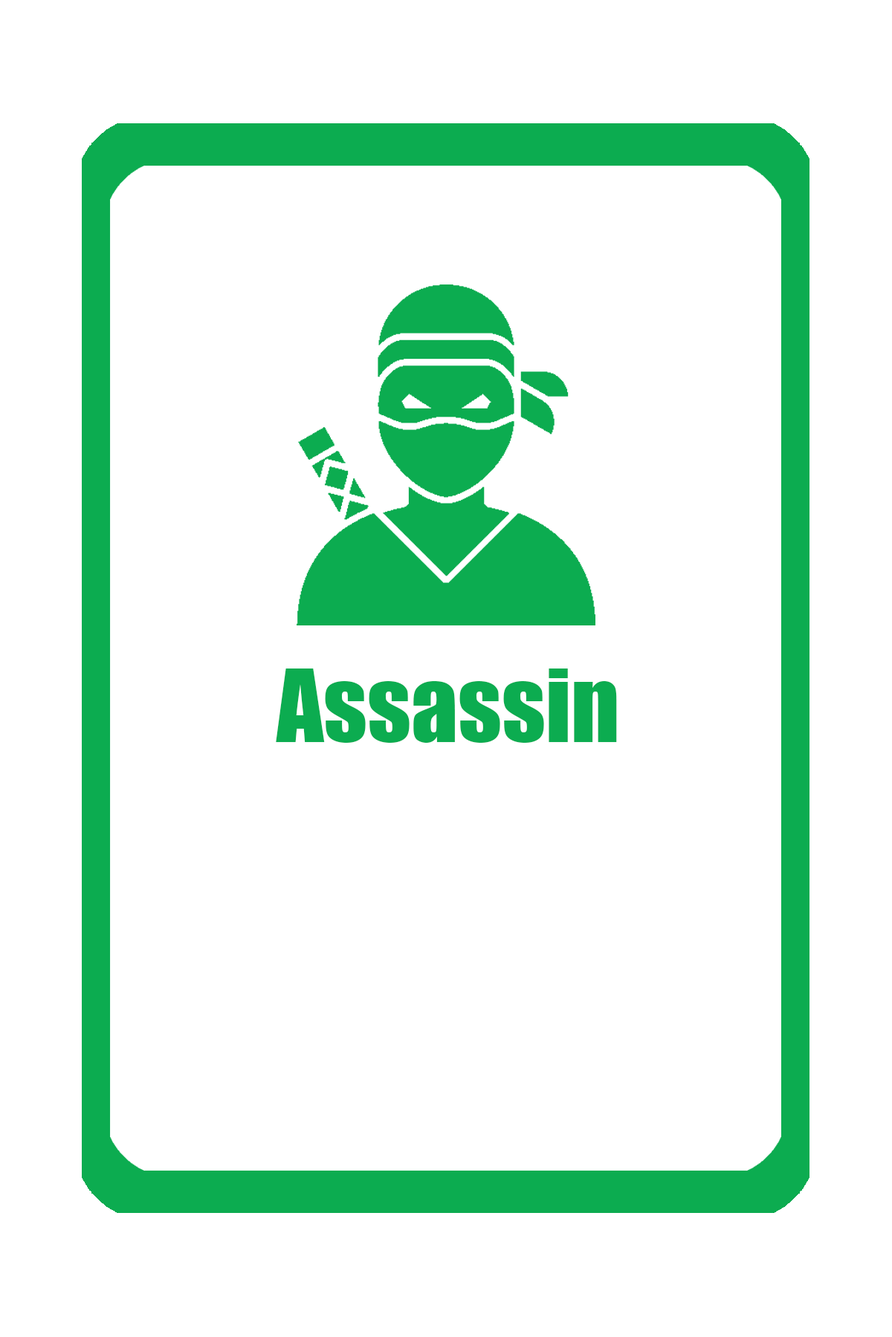
<style>
.page{position:relative;width:892px;height:1337px;background:#ffffff}
.page>*{position:absolute;margin:0}
.t1{font:92.9px "Impact";color:#0cac50}
</style>
<div class="page">
<p class="t1" style="left:276px;top:669px;width:341px;height:74px">Assassin</p>
</div>
